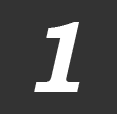
<style>
.page{position:relative;width:117px;height:114px;background:#333333}
.page>*{position:absolute;margin:0}
.t1{font:100px "BookmanOldStyle-BoldItalic";color:#ffffff}
</style>
<div class="page">
<p class="t1" style="left:34px;top:22px;width:46px;height:70px">1</p>
</div>
